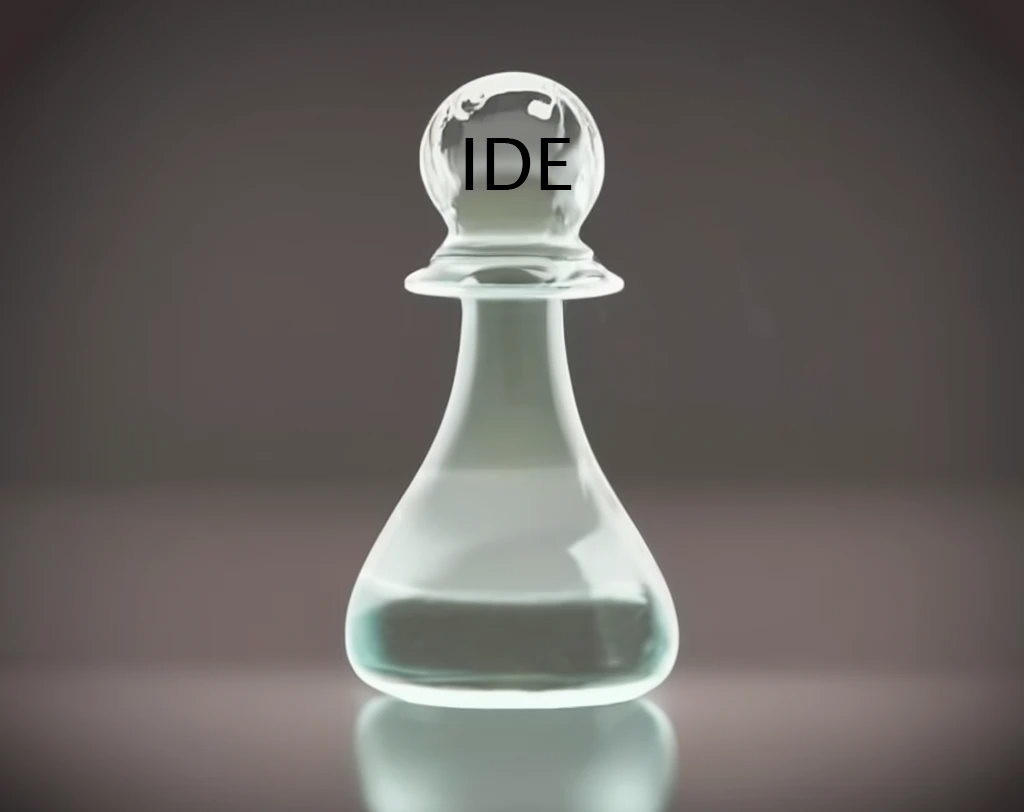
<style>
.page{position:relative;width:1024px;height:812px}
.page>*{position:absolute;margin:0}
.t1{font:71.8px "LucidaSans";color:#000000}
</style>
<div class="page">
<p class="t1" style="left:465px;top:138px;width:107px;height:52px">IDE</p>
</div>
